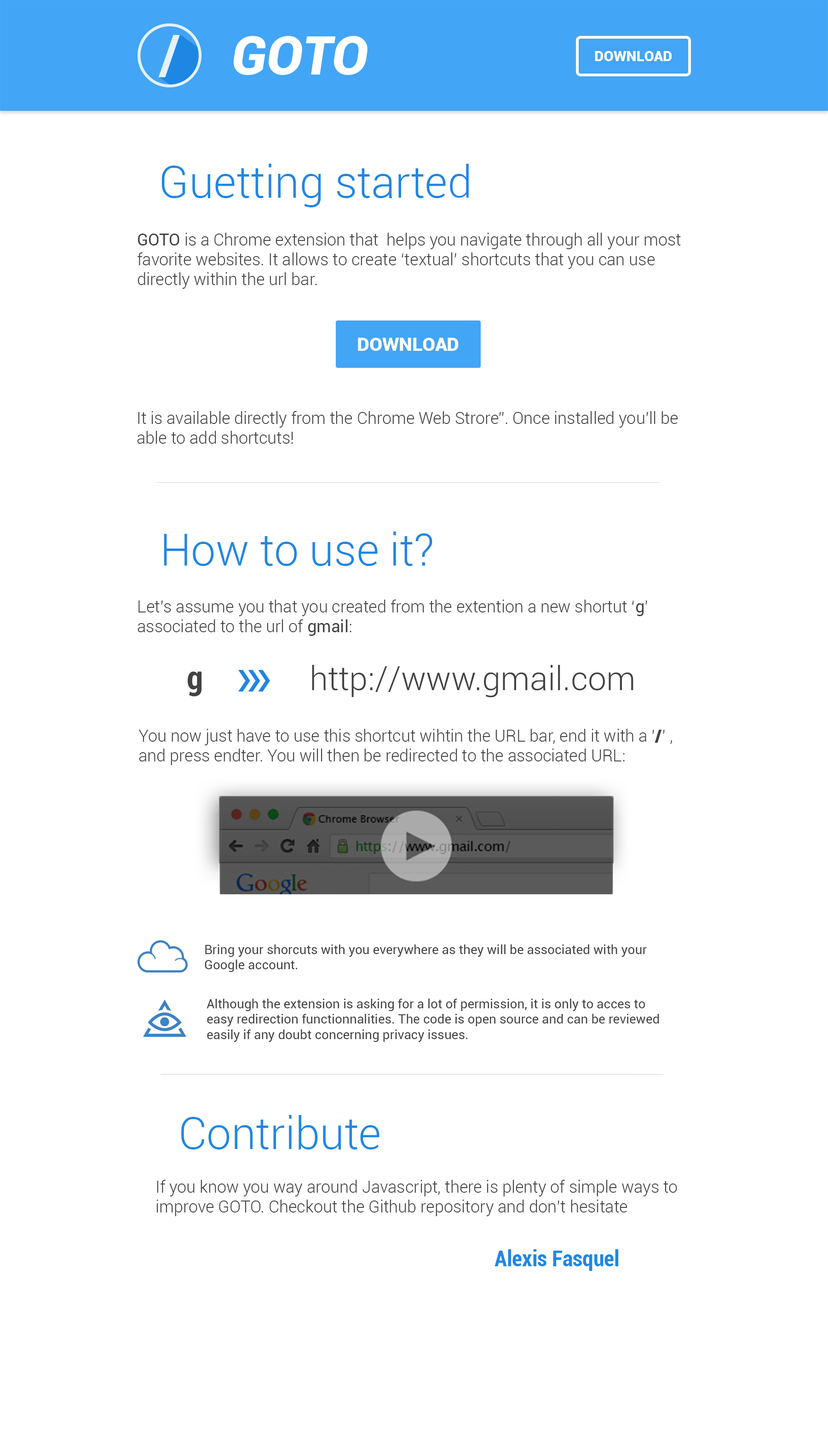
<style>
.page{position:relative;width:828px;height:1441px;background:#ffffff}
.page>*{position:absolute;margin:0}
.t1{font:53.1px "Roboto-BlackItalic";color:#ffffff}
.t2{font:14.2px "Roboto-Black";color:#ffffff}
.t3{font:44.1px "Roboto-Light";color:#1e87e4}
.t4{font:16.6px "Roboto-Light";color:#424242}
.t5{font:16.6px "Roboto-Regular";color:#424242}
.t6{font:18.6px "Roboto-Black";color:#ffffff}
.t7{font:33.1px "Roboto-Light";color:#424242}
.t8{font:33.1px "Roboto-BoldCondensed";color:#424242}
.t9{font:16.6px "Roboto-Black";color:#424242}
.t10{font:12.9px "Roboto-Regular";color:#424242}
.t11{font:22.1px "Roboto-BoldCondensed";color:#1e87e4}
</style>
<div class="page">
<p class="t1" style="left:233px;top:36px;width:134px;height:39px">GOTO</p>
<p class="t2" style="left:594px;top:51px;width:77px;height:10px">DOWNLOAD</p>
<p class="t3" style="left:161px;top:164px;width:307px;height:43px">Guetting started</p>
<p class="t4" style="left:137px;top:233px;width:543px;height:56px"><span class="t5">GOTO </span>is a Chrome extension that  helps you navigate through all your most<br>favorite websites. It allows to create ‘textual’ shortcuts that you can use <br>directly within the url bar.</p>
<p class="t6" style="left:358px;top:337px;width:100px;height:14px">DOWNLOAD</p>
<p class="t4" style="left:137px;top:411px;width:541px;height:33px">It is available directly from the Chrome Web Strore”. Once installed you’ll be <br>able to add shortcuts!</p>
<p class="t3" style="left:164px;top:531px;width:268px;height:35px">How to use it?</p>
<p class="t4" style="left:137px;top:600px;width:510px;height:36px">Let’s assume you that you created from the extention a new shortut ‘<span class="t5">g</span>’ <br>associated to the url of <span class="t5">gmail</span>:</p>
<p class="t7" style="left:312px;top:665px;width:321px;height:32px">http://www.gmail.com</p>
<p class="t8" style="left:188px;top:671px;width:14px;height:26px">g</p>
<p class="t4" style="left:138px;top:729px;width:534px;height:36px">You now just have to use this shortcut wihtin the URL bar, end it with a ’<span class="t9">/</span>’ , <br>and press endter. You will then be redirected to the associated URL:</p>
<p class="t10" style="left:205px;top:944px;width:441px;height:28px">Bring your shorcuts with you everywhere as they will be associated with your <br>Google account.</p>
<p class="t10" style="left:206px;top:999px;width:453px;height:43px">Although the extension is asking for a lot of permission, it is only to acces to<br>easy redirection functionnalities. The code is open source and can be reviewed <br>easily if any doubt concerning privacy issues.</p>
<p class="t3" style="left:181px;top:1115px;width:198px;height:34px">Contribute</p>
<p class="t4" style="left:156px;top:1180px;width:521px;height:36px">If you know you way around Javascript, there is plenty of simple ways to <br>improve GOTO. Checkout the Github repository and don’t hesitate</p>
<p class="t11" style="left:494px;top:1249px;width:124px;height:22px">Alexis Fasquel</p>
</div>
